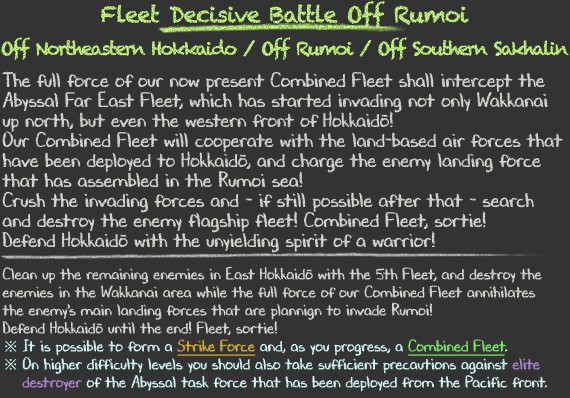
<style>
.page{position:relative;width:570px;height:398px;background:#333333}
.page>*{position:absolute;margin:0}
.t1{font:18px/36px "Chalkduster";letter-spacing:-0.09em}
.t2{font:22px/36px "Chalkduster";letter-spacing:-0.04em}
.t3{font:20px/20px "DJBChalkItUp";color:#d9ded6}
.t4{font:16px/18px "DJBChalkItUp";color:#d9ded6}
.t5{font:16px/18px "TimesNewRomanPSMT";color:#d7feff}
.t6{font:16px/18px "DJBChalkItUp";color:#d7feff}
.t7{font:16px/18px "DJBChalkItUp";color:#dfb731;text-decoration:underline}
.t8{font:16px/18px "DJBChalkItUp";color:#7bf26b;text-decoration:underline}
.t9{font:16px/18px "DJBChalkItUp";color:#b489d6}
</style>
<div class="page">
<p class="t1" style="left:1px;top:1px;width:568px;height:59px;text-align:center"><span class="t2">Fleet Decisive Battle Off Rumoi<br></span>Off Northeastern Hokkaido / Off Rumoi / Off Southern Sakhalin</p>
<p class="t3" style="left:1px;top:71px;width:562px;height:321px">The full force of our now present Combined Fleet shall intercept the<br>Abyssal Far East Fleet, which has started invading not only Wakkanai<br>up north, but even the western front of Hokkaidō!<br>Our Combined Fleet will cooperate with the land-based air forces that<br>have been deployed to Hokkaidō, and charge the enemy landing force<br>that has assembled in the Rumoi sea!<br>Crush the invading forces and - if still possible after that - search<br>and destroy the enemy flagship fleet! Combined Fleet, sortie!<br>Defend Hokkaidō with the unyielding spirit of a warrior!<br><br><span class="t4">Clean up the remaining enemies in East Hokkaidō with the 5th Fleet, and destroy the<br>enemies in the Wakkanai area while the full force of our Combined Fleet annihilates<br>the enemy's main landing forces that are plannign to invade Rumoi!<br>Defend Hokkaidō until the end! Fleet, sortie!<br></span><span class="t5">※ </span><span class="t6">It is possible to form a </span><span class="t7">Strike Force</span><span class="t6"> and, as you progress, a </span><span class="t8">Combined Fleet</span><span class="t6">.<br></span><span class="t5">※ </span><span class="t6">On higher difficulty levels you should also take sufficient precautions against </span><span class="t9">elite<br>　 destroyer</span><span class="t6"> of the Abyssal task force that has been deployed from the Pacific front.</span></p>
</div>
